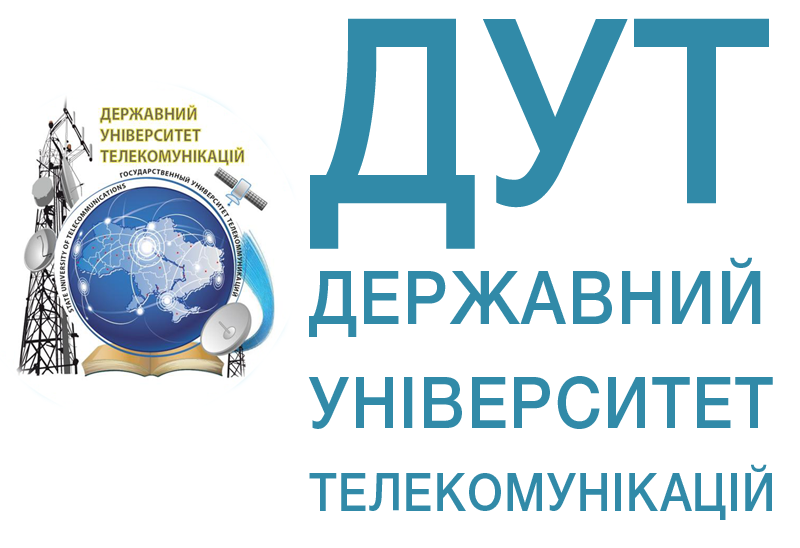
<style>
.page{position:relative;width:800px;height:548px;background:#ffffff}
.page>*{position:absolute;margin:0}
.t1{font:51.9px/83.3px "HelveticaNeueCyr-Medium";letter-spacing:0.03em;color:#318aa8;text-transform:uppercase;scale:0.9 1}
.t2{font:258.3px/104.2px "HelveticaNeueCyr-Medium";letter-spacing:0.03em;color:#318aa8;scale:0.9 1}
.t3{font:74.1px/120.8px "HelveticaNeueCyr-Medium";letter-spacing:0.03em;color:#318aa8;text-transform:uppercase;scale:0.9 1}
.t4{font:72px/104.2px "HelveticaNeueCyr-Medium";letter-spacing:0.03em;color:#318aa8;text-transform:uppercase;scale:0.9 1}
</style>
<div class="page">
<p class="t1" style="left:308px;top:18px;width:465px;height:502px"><span class="t2">ДУТ<br></span><span class="t3">Державний<br></span><span class="t4">університет<br></span>телекомунікацій</p>
</div>
